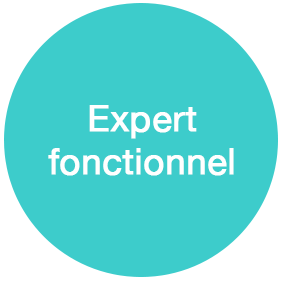
<style>
.page{position:relative;width:290px;height:290px;background:#3dcccb}
.page>*{position:absolute;margin:0}
.t1{font:36px "HelveticaNeue";color:#ffffff;font-weight:bold}
</style>
<div class="page">
<p class="t1" style="left:48px;top:105px;width:186px;height:71px;text-align:center">Expert<br>fonctionnel</p>
</div>
